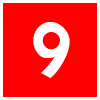
<style>
.page{position:relative;width:100px;height:100px;background:#ff0000}
.page>*{position:absolute;margin:0}
.t1{font:72px "ELEGANCE";color:#ffffff}
</style>
<div class="page">
<p class="t1" style="left:33px;top:22px;width:37px;height:56px">9</p>
</div>
